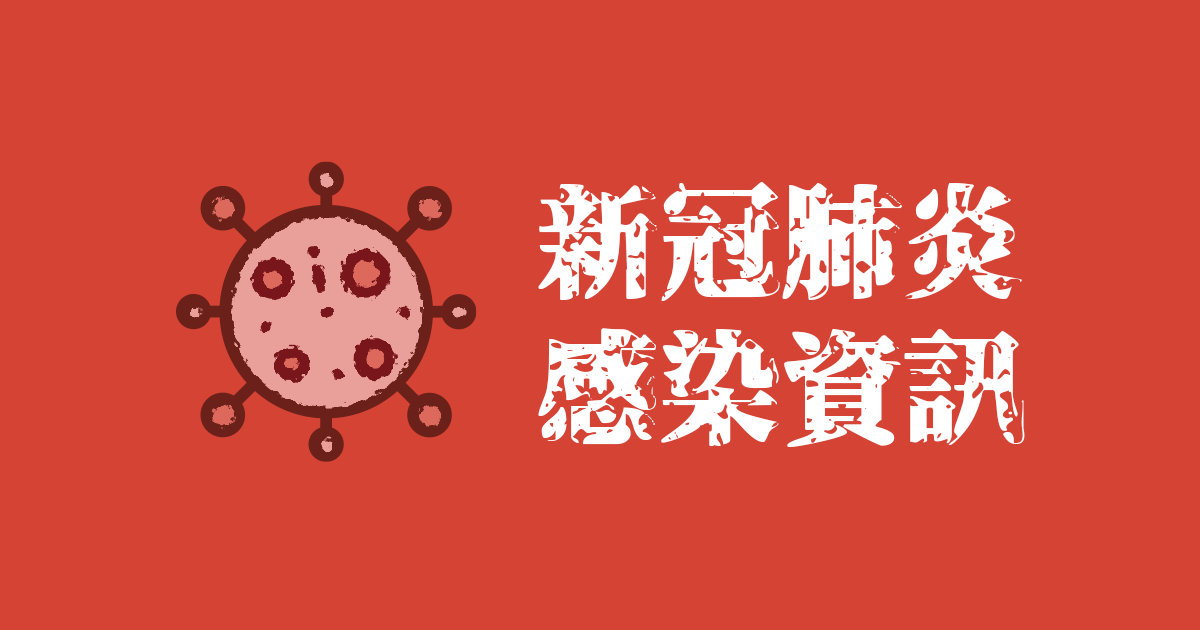
<style>
.page{position:relative;width:1200px;height:630px;background:#d54334}
.page>*{position:absolute;margin:0}
.t1{font:122px "Genkaimincho";color:#ffffff}
</style>
<div class="page">
<p class="t1" style="left:538px;top:182px;width:487px;height:265px">新冠肺炎<br>感染資訊</p>
</div>
